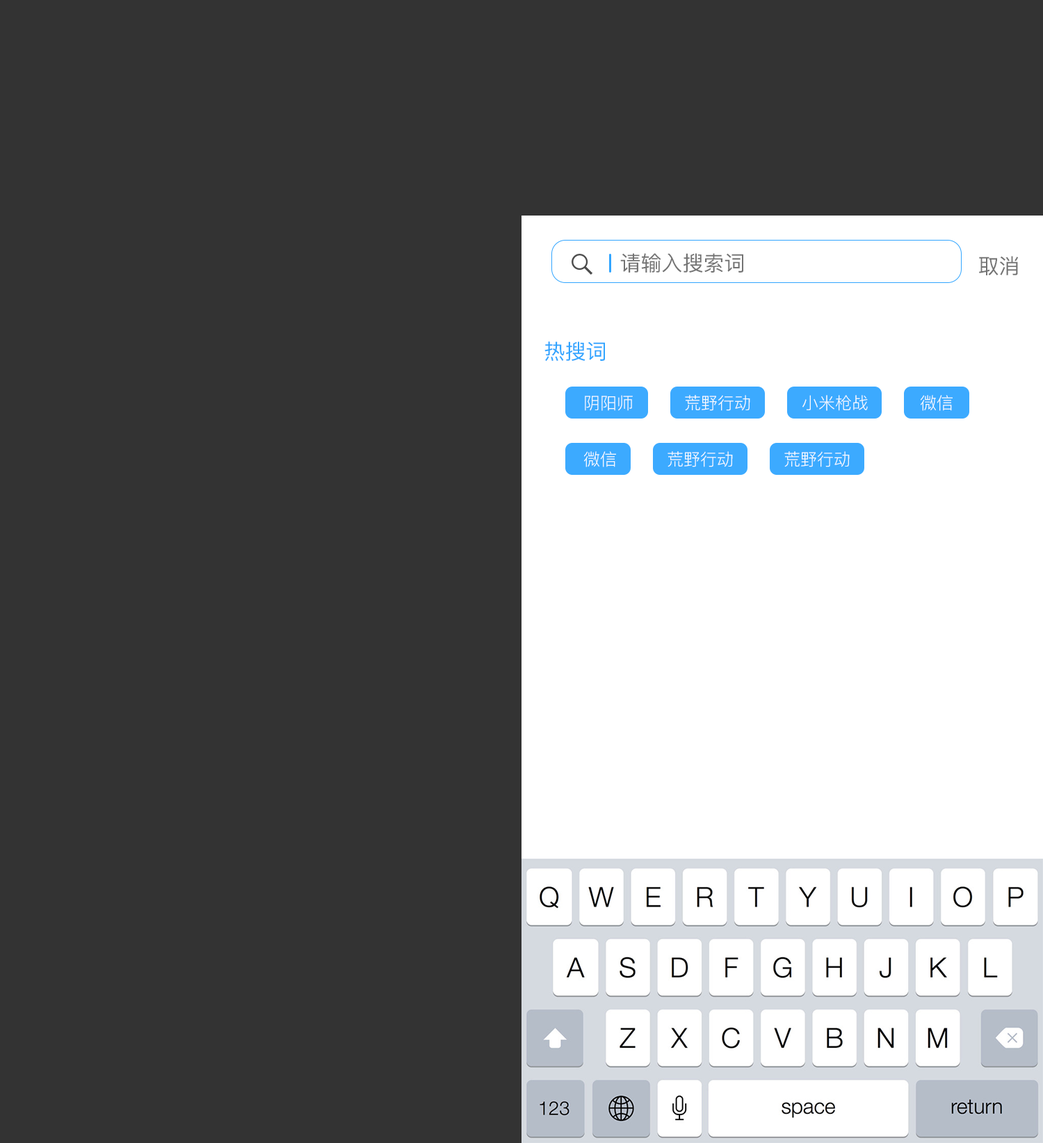
<style>
.page{position:relative;width:1043px;height:1143px;background:#333333}
.page>*{position:absolute;margin:0}
.t1{font:20.9px "PingFang-SC-Medium";color:#737373}
.t2{font:20.9px "PingFang-SC-Medium";color:#31a5ff}
.t3{font:16.7px "PingFang-SC-Regular";color:#ffffff}
</style>
<div class="page">
<p class="t1" style="left:620px;top:253px;width:123px;height:20px">请输入搜索词</p>
<p class="t1" style="left:979px;top:256px;width:39px;height:19px">取消</p>
<p class="t2" style="left:544px;top:341px;width:61px;height:20px">热搜词</p>
<p class="t3" style="left:585px;top:395px;width:48px;height:16px">阴阳师</p>
<p class="t3" style="left:685px;top:395px;width:65px;height:16px">荒野行动</p>
<p class="t3" style="left:802px;top:395px;width:66px;height:16px">小米枪战</p>
<p class="t3" style="left:921px;top:395px;width:32px;height:16px">微信</p>
<p class="t3" style="left:584px;top:451px;width:32px;height:16px">微信</p>
<p class="t3" style="left:668px;top:451px;width:65px;height:16px">荒野行动</p>
<p class="t3" style="left:784px;top:451px;width:66px;height:16px">荒野行动</p>
</div>
